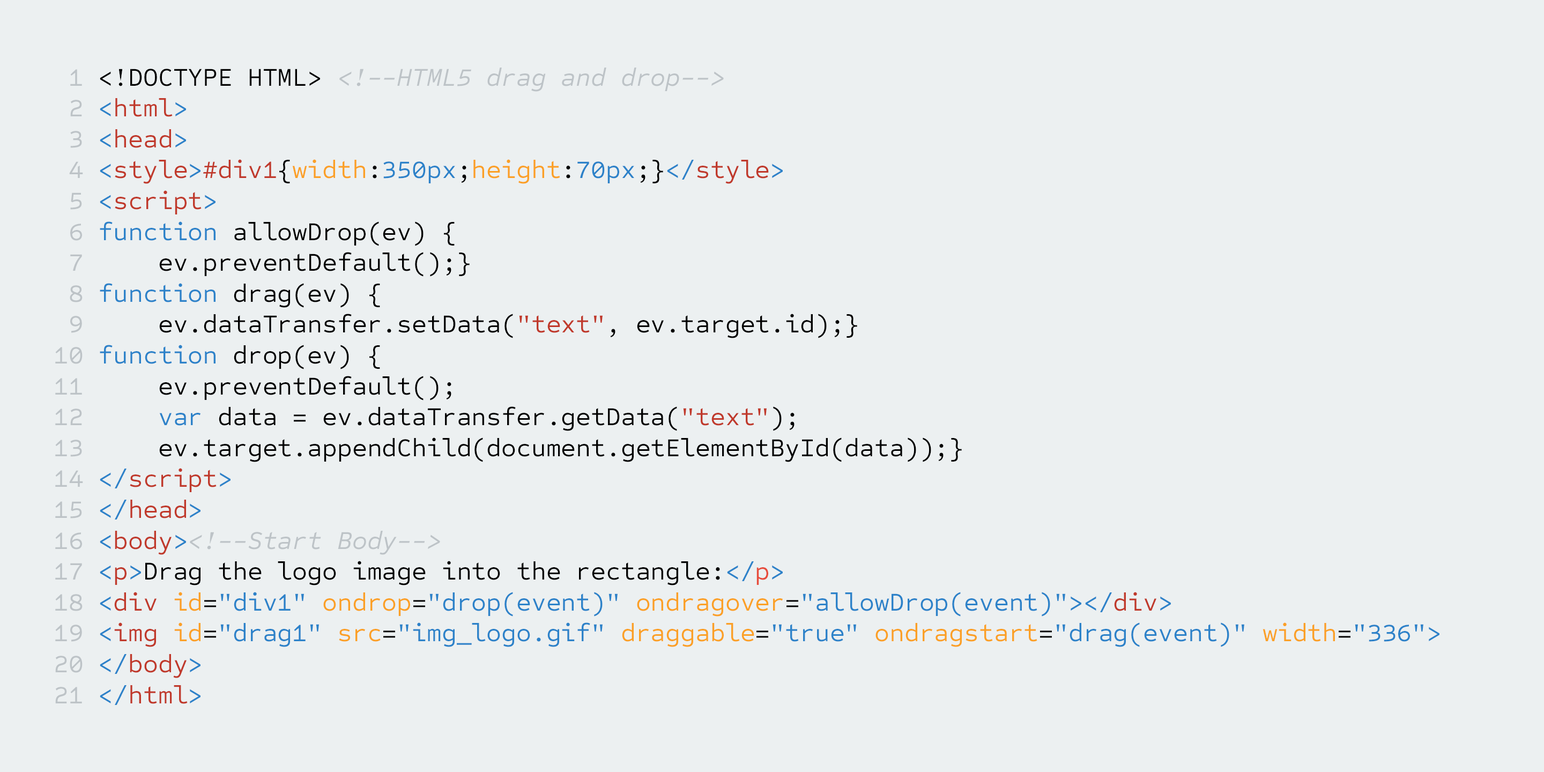
<style>
.page{position:relative;width:1544px;height:772px;background:#ecf0f1}
.page>*{position:absolute;margin:0}
.t1{font:25.7px "SometypeMono-Regular";color:#000000}
.t2{font:25.7px "SometypeMono-Regular";color:#bdc3c7}
.t3{font:25.7px "SometypeMono-RegularItalic";color:#bdc3c7}
.t4{font:25.7px "SometypeMono-Regular";color:#2c82c9}
.t5{font:25.7px "SometypeMono-Regular";color:#c0392b}
.t6{font:25.7px "SometypeMono-Regular";color:#fba026}
.t7{font:25.7px "SometypeMono-Regular";color:#e74c3c}
</style>
<div class="page">
<p class="t1" style="left:55px;top:68px;width:1385px;height:637px"><span class="t2"> 1</span> &lt;!DOCTYPE HTML&gt; <span class="t3">&lt;!--HTML5 drag and drop--&gt;<br> </span><span class="t2">2</span><span class="t4"> &lt;</span><span class="t5">html</span><span class="t4">&gt;<br> </span><span class="t2">3</span><span class="t4"> &lt;</span><span class="t5">head</span><span class="t4">&gt;<br> </span><span class="t2">4 </span><span class="t4">&lt;</span><span class="t5">style</span><span class="t4">&gt;</span><span class="t5">#div1</span>{<span class="t6">width</span>:<span class="t4">350px</span>;<span class="t6">height</span>:<span class="t4">70px</span>;}<span class="t4">&lt;/</span><span class="t5">style</span><span class="t4">&gt;<br> </span><span class="t2">5 </span><span class="t4">&lt;</span><span class="t5">script</span><span class="t4">&gt;<br> </span><span class="t2">6 </span><span class="t4">function</span> allowDrop(ev) {<br> <span class="t2">7 </span>    ev.preventDefault();}<br> <span class="t2">8 </span><span class="t4">function</span> drag(ev) {<br> <span class="t2">9 </span>    ev.dataTransfer.setData(<span class="t5">"text"</span>, ev.target.id);}<br><span class="t2">10 </span><span class="t4">function</span> drop(ev) {<br><span class="t2">11 </span>    ev.preventDefault();<br><span class="t2">12     </span><span class="t4">var</span> data = ev.dataTransfer.getData(<span class="t5">"text"</span>);<br><span class="t2">13 </span>    ev.target.appendChild(document.getElementById(data));}<br><span class="t2">14 </span><span class="t4">&lt;/</span><span class="t5">script</span><span class="t4">&gt;<br></span><span class="t2">15 </span><span class="t4">&lt;/</span><span class="t5">head</span><span class="t4">&gt; </span><span class="t2"><br>16 </span><span class="t4">&lt;</span><span class="t5">body</span><span class="t4">&gt;</span><span class="t3">&lt;!--Start Body--&gt;<br></span><span class="t2">17 </span><span class="t4">&lt;</span><span class="t5">p</span><span class="t4">&gt;</span>Drag the logo image into the rectangle:<span class="t4">&lt;/</span><span class="t7">p</span><span class="t4">&gt;<br></span><span class="t2">18 </span><span class="t4">&lt;</span><span class="t5">div </span><span class="t6">id</span>=<span class="t4">"div1" </span><span class="t6">ondrop</span>=<span class="t4">"drop(event)" </span><span class="t6">ondragover</span>=<span class="t4">"allowDrop(event)"&gt;&lt;/</span><span class="t5">div</span><span class="t4">&gt;<br></span><span class="t2">19 </span><span class="t4">&lt;</span><span class="t5">img </span><span class="t6">id</span>=<span class="t4">"drag1" </span><span class="t6">src</span>=<span class="t4">"img_logo.gif" </span><span class="t6">draggable</span>=<span class="t4">"true" </span><span class="t6">ondragstart</span>=<span class="t4">"drag(event)" </span><span class="t6">width</span>=<span class="t4">"336"&gt;<br></span><span class="t2">20 </span><span class="t4">&lt;/</span><span class="t5">body</span><span class="t4">&gt;<br></span><span class="t2">21 </span><span class="t4">&lt;/</span><span class="t5">html</span><span class="t4">&gt;</span></p>
</div>
